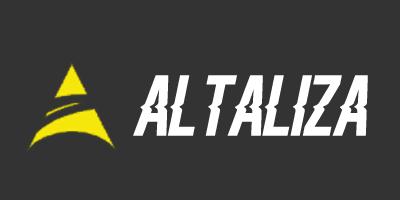
<style>
.page{position:relative;width:400px;height:200px;background:#333333}
.page>*{position:absolute;margin:0}
.t1{font:60px "Blacklisted";color:#ffffff}
</style>
<div class="page">
<p class="t1" style="left:133px;top:75px;width:235px;height:61px">ALTALIZA</p>
</div>
